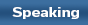
<style>
.page{position:relative;width:88px;height:25px;background:#3c6e9f}
.page>*{position:absolute;margin:0}
.t1{font:12px "Usual-Bold";color:#ffffff;scale:1.21 1}
</style>
<div class="page">
<p class="t1" style="left:12px;top:7px;width:67px;height:12px">Speaking</p>
</div>
